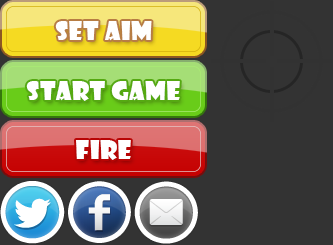
<style>
.page{position:relative;width:333px;height:245px;background:#333333}
.page>*{position:absolute;margin:0}
.t1{font:25px "ShowcardGothic-Reg";letter-spacing:0.025em;color:#ffffff}
</style>
<div class="page">
<p class="t1" style="left:55px;top:21px;width:97px;height:20px">Set Aim</p>
<p class="t1" style="left:26px;top:81px;width:154px;height:20px">Start GAME</p>
<p class="t1" style="left:76px;top:140px;width:55px;height:20px">Fire</p>
</div>
